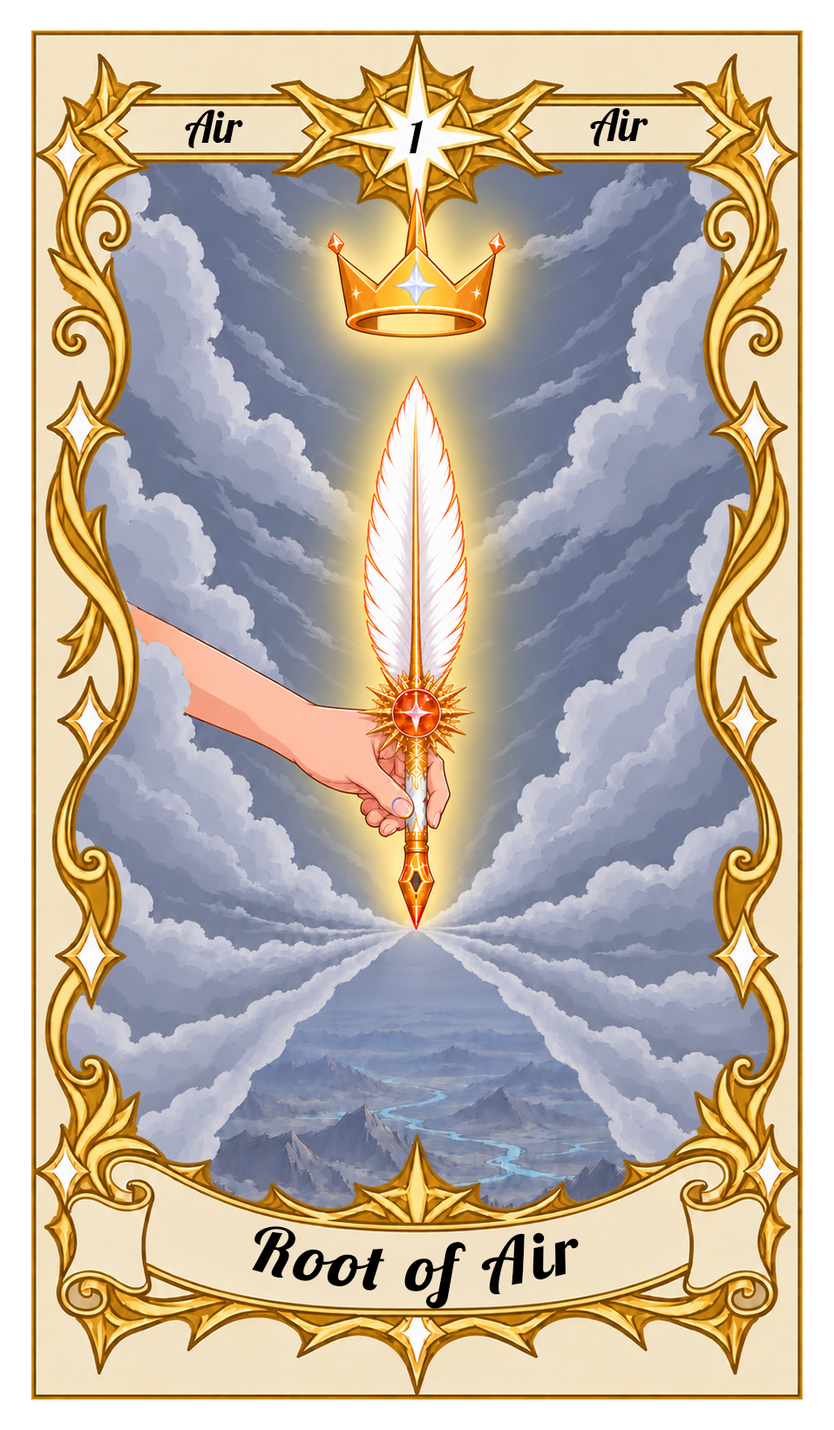
<style>
.page{position:relative;width:834px;height:1430px}
.page>*{position:absolute;margin:0}
.t1{font:43.6px "Lobster-Regular";color:#000000}
.t2{font:65.3px "Lobster-Regular";letter-spacing:0.05em;color:#000000}
</style>
<div class="page">
<p class="t1" style="left:185px;top:110px;width:58px;height:38px">Air</p>
<p class="t1" style="left:590px;top:108px;width:58px;height:38px">Air</p>
<p class="t1" style="left:409px;top:120px;width:14px;height:33px">1</p>
<p class="t2" style="left:252px;top:1227px;width:326px;height:82px">Root of Air</p>
</div>
